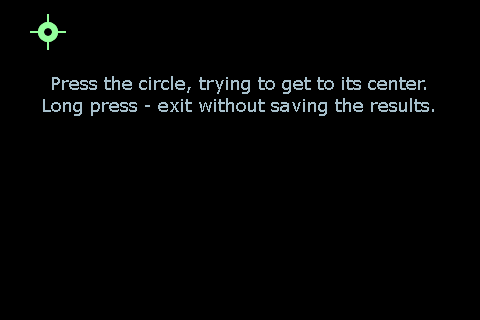
<style>
.page{position:relative;width:480px;height:320px;background:#000000}
.page>*{position:absolute;margin:0}
.t1{font:18px "Verdana";color:#a6bfcb}
</style>
<div class="page">
<p class="t1" style="left:43px;top:76px;width:391px;height:40px;text-align:center">Press the circle, trying to get to its center.<br>Long press - exit without saving the results.</p>
</div>
